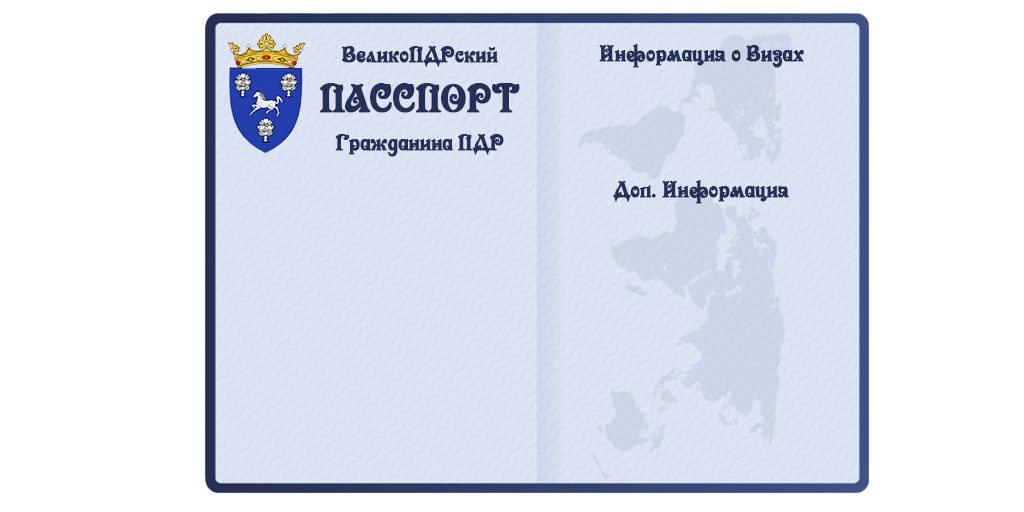
<style>
.page{position:relative;width:1024px;height:512px;background:#ffffff}
.page>*{position:absolute;margin:0}
.t1{font:24px/37.8px "NK123";letter-spacing:-0.04em;color:#262f56;font-weight:bold;scale:0.95 1}
.t2{font:24px/49.8px "NK123";letter-spacing:-0.04em;color:#262f56;font-weight:bold;scale:0.95 1}
.t3{font:42px/49.8px "NK123";letter-spacing:-0.04em;color:#262f56;font-weight:bold;scale:0.95 1}
.t4{font:24px "NK123";letter-spacing:-0.04em;color:#262f56;font-weight:bold;scale:0.95 1}
</style>
<div class="page">
<p class="t1" style="left:320px;top:46px;width:200px;height:111px;text-align:center"><span class="t2">ВеликоПДРский<br></span><span class="t3">ПАССПОРТ<br></span>Гражданина ПДР</p>
<p class="t4" style="left:599px;top:44px;width:205px;height:24px">Информация о Визах</p>
<p class="t4" style="left:613px;top:180px;width:176px;height:24px">Доп. Информация</p>
</div>
